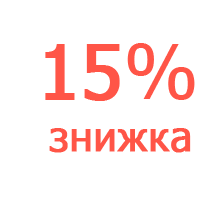
<style>
.page{position:relative;width:200px;height:200px;background:#ffffff}
.page>*{position:absolute;margin:0}
.t1{font:75.6px "Tahoma";color:#ff5547;font-weight:bold}
.t2{font:75.6px "Tahoma";color:#ff5547}
.t3{font:41px "Tahoma";color:#ff5547;font-weight:bold}
</style>
<div class="page">
<p class="t1" style="left:45px;top:43px;width:150px;height:58px">15<span class="t2">%</span></p>
<p class="t3" style="left:49px;top:128px;width:142px;height:25px">знижка</p>
</div>
